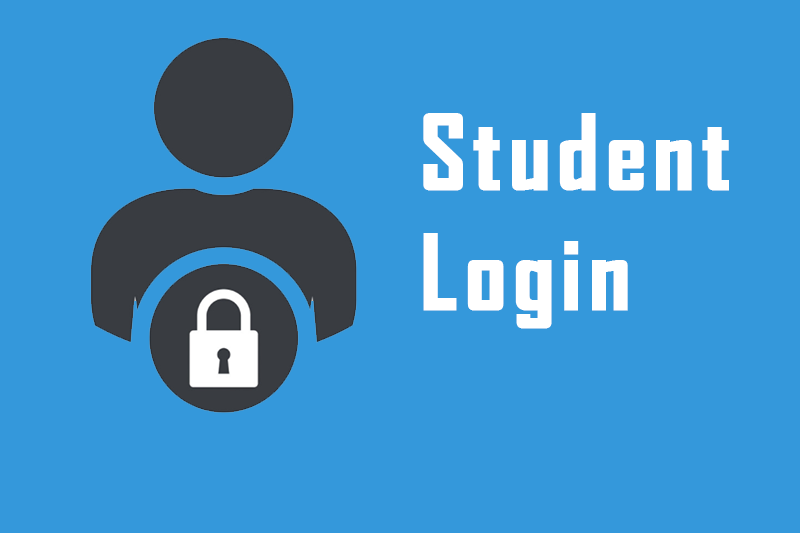
<style>
.page{position:relative;width:800px;height:533px;background:#3498db}
.page>*{position:absolute;margin:0}
.t1{font:100px "AgencyFB-Bold";letter-spacing:0.05em;color:#ffffff;font-weight:bold}
</style>
<div class="page">
<p class="t1" style="left:423px;top:113px;width:306px;height:216px">Student<br>Login</p>
</div>
